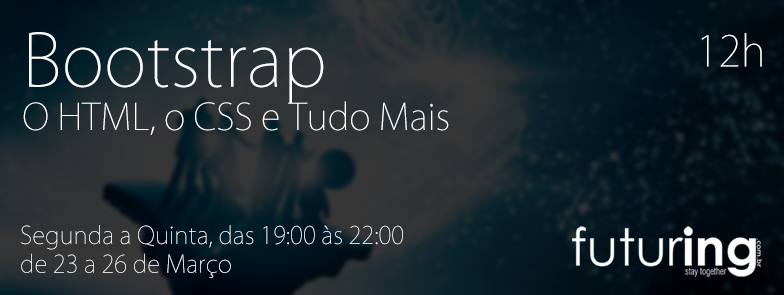
<style>
.page{position:relative;width:784px;height:295px}
.page>*{position:absolute;margin:0}
.t1{font:36px "KozGoPro-ExtraLight";color:#ffffff}
.t2{font:72px "KozGoPro-ExtraLight";color:#ffffff}
.t3{font:42px "KozGoPro-ExtraLight";color:#ffffff}
.t4{font:24px "KozGoPro-ExtraLight";color:#ffffff}
</style>
<div class="page">
<p class="t1" style="left:23px;top:32px;width:426px;height:103px"><span class="t2">Bootstrap<br></span>O HTML, o CSS e Tudo Mais</p>
<p class="t3" style="left:701px;top:33px;width:61px;height:34px">12h</p>
<p class="t4" style="left:21px;top:225px;width:382px;height:53px">Segunda a Quinta, das 19:00 às 22:00<br>de 23 a 26 de Março</p>
</div>
